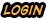
<style>
.page{position:relative;width:47px;height:20px;background:#000000}
.page>*{position:absolute;margin:0}
.t1{font:10px "DigitalStripBold";color:#febc3a}
</style>
<div class="page">
<p class="t1" style="left:3px;top:5px;width:41px;height:10px">login</p>
</div>
